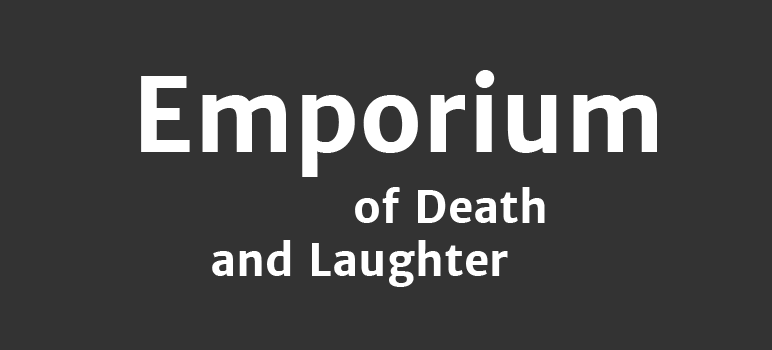
<style>
.page{position:relative;width:772px;height:350px;background:#333333}
.page>*{position:absolute;margin:0}
.t1{font:44px "MerriweatherSans-Bold";color:#fffffe}
.t2{font:100px "MerriweatherSans-Bold";color:#fffffe}
</style>
<div class="page">
<p class="t1" style="left:141px;top:70px;width:516px;height:217px;text-align:center"><span class="t2">Emporium<br>  <br></span>                 of Death<br>       and Laughter</p>
</div>
